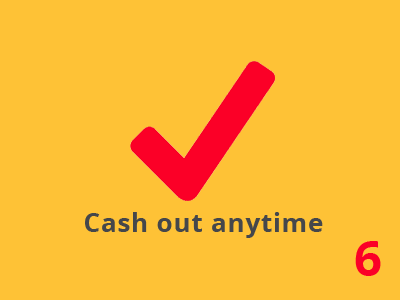
<style>
.page{position:relative;width:400px;height:300px;background:#fec236}
.page>*{position:absolute;margin:0}
.t1{font:26px "OpenSans-Bold";letter-spacing:0.03em;color:#45474b}
.t2{font:49px "OpenSans-Bold";letter-spacing:0.03em;color:#fb0027}
</style>
<div class="page">
<p class="t1" style="left:85px;top:212px;width:238px;height:26px">Cash out anytime</p>
<p class="t2" style="left:355px;top:241px;width:26px;height:35px">6</p>
</div>
